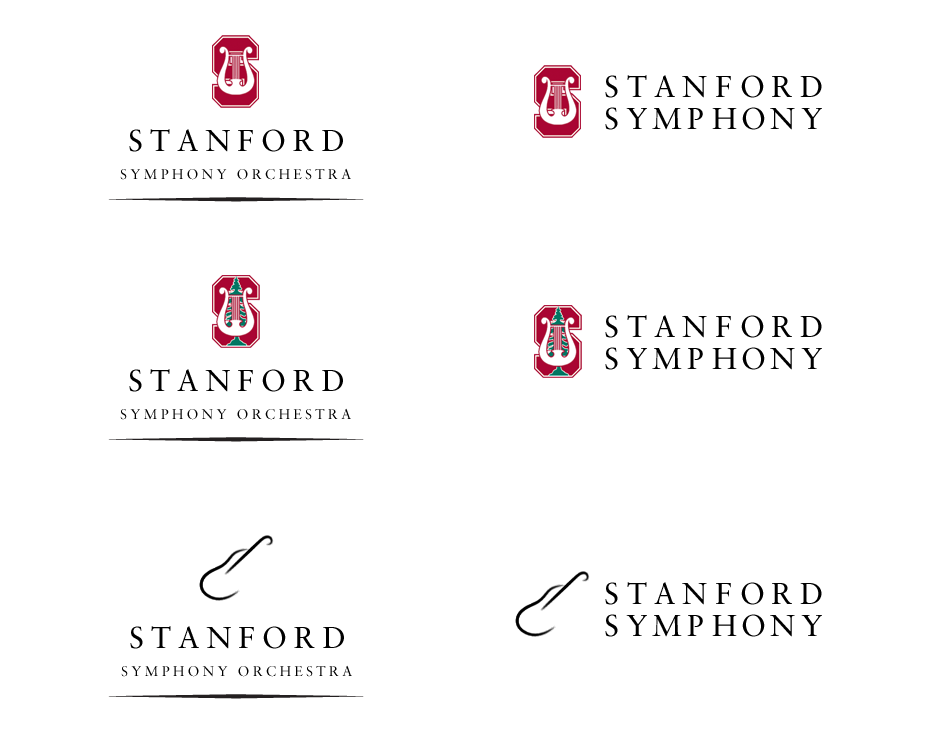
<style>
.page{position:relative;width:940px;height:731px;background:#ffffff}
.page>*{position:absolute;margin:0}
.t1{font:30px "SabonLTStd-Roman";letter-spacing:0.23em;color:#000000}
.t2{font:14px "SabonLTStd-Roman";letter-spacing:0.23em;color:#000000}
</style>
<div class="page">
<p class="t1" style="left:605px;top:75px;width:13px;height:23px">S</p>
<p class="t1" style="left:627px;top:75px;width:20px;height:22px">T</p>
<p class="t1" style="left:654px;top:75px;width:21px;height:22px">A</p>
<p class="t1" style="left:682px;top:76px;width:25px;height:22px">N</p>
<p class="t1" style="left:716px;top:76px;width:15px;height:21px">F</p>
<p class="t1" style="left:741px;top:75px;width:23px;height:23px">O</p>
<p class="t1" style="left:772px;top:76px;width:20px;height:21px">R</p>
<p class="t1" style="left:800px;top:76px;width:22px;height:21px">D</p>
<p class="t1" style="left:605px;top:107px;width:13px;height:23px">S</p>
<p class="t1" style="left:626px;top:108px;width:21px;height:21px">Y</p>
<p class="t1" style="left:652px;top:108px;width:30px;height:22px">M</p>
<p class="t1" style="left:687px;top:108px;width:16px;height:21px">P</p>
<p class="t1" style="left:712px;top:108px;width:25px;height:21px">H</p>
<p class="t1" style="left:742px;top:107px;width:23px;height:23px">O</p>
<p class="t1" style="left:770px;top:108px;width:25px;height:22px">N</p>
<p class="t1" style="left:801px;top:108px;width:21px;height:21px">Y</p>
<p class="t1" style="left:605px;top:315px;width:13px;height:23px">S</p>
<p class="t1" style="left:627px;top:315px;width:20px;height:22px">T</p>
<p class="t1" style="left:654px;top:315px;width:21px;height:22px">A</p>
<p class="t1" style="left:682px;top:316px;width:25px;height:22px">N</p>
<p class="t1" style="left:716px;top:316px;width:15px;height:21px">F</p>
<p class="t1" style="left:741px;top:315px;width:23px;height:23px">O</p>
<p class="t1" style="left:772px;top:316px;width:20px;height:21px">R</p>
<p class="t1" style="left:800px;top:316px;width:22px;height:21px">D</p>
<p class="t1" style="left:605px;top:347px;width:13px;height:23px">S</p>
<p class="t1" style="left:626px;top:348px;width:21px;height:21px">Y</p>
<p class="t1" style="left:652px;top:348px;width:30px;height:22px">M</p>
<p class="t1" style="left:687px;top:348px;width:16px;height:21px">P</p>
<p class="t1" style="left:712px;top:348px;width:25px;height:21px">H</p>
<p class="t1" style="left:742px;top:347px;width:23px;height:23px">O</p>
<p class="t1" style="left:770px;top:348px;width:25px;height:22px">N</p>
<p class="t1" style="left:801px;top:348px;width:21px;height:21px">Y</p>
<p class="t1" style="left:605px;top:582px;width:13px;height:23px">S</p>
<p class="t1" style="left:627px;top:582px;width:20px;height:22px">T</p>
<p class="t1" style="left:654px;top:582px;width:21px;height:22px">A</p>
<p class="t1" style="left:741px;top:582px;width:23px;height:23px">O</p>
<p class="t1" style="left:682px;top:583px;width:25px;height:22px">N</p>
<p class="t1" style="left:716px;top:583px;width:15px;height:21px">F</p>
<p class="t1" style="left:772px;top:583px;width:20px;height:21px">R</p>
<p class="t1" style="left:800px;top:583px;width:22px;height:21px">D</p>
<p class="t1" style="left:605px;top:614px;width:13px;height:23px">S</p>
<p class="t1" style="left:626px;top:615px;width:21px;height:21px">Y</p>
<p class="t1" style="left:652px;top:615px;width:30px;height:22px">M</p>
<p class="t1" style="left:687px;top:615px;width:16px;height:21px">P</p>
<p class="t1" style="left:712px;top:615px;width:25px;height:21px">H</p>
<p class="t1" style="left:742px;top:614px;width:23px;height:23px">O</p>
<p class="t1" style="left:770px;top:615px;width:25px;height:22px">N</p>
<p class="t1" style="left:801px;top:615px;width:21px;height:21px">Y</p>
<p class="t1" style="left:130px;top:626px;width:214px;height:23px">STANFORD</p>
<p class="t2" style="left:121px;top:665px;width:231px;height:12px">SYMPHONY ORCHESTRA</p>
</div>
